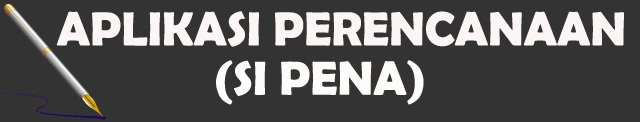
<style>
.page{position:relative;width:640px;height:122px;background:#333333}
.page>*{position:absolute;margin:0}
.t1{font:48px "BerlinSansFBDemi-Bold";color:#fbf5f5}
.t2{font:48px "BerlinSansFBDemi-Bold";color:#fefbfb}
.t3{font:48px "BerlinSansFBDemi-Bold";color:#090909}
</style>
<div class="page">
<p class="t1" style="left:56px;top:11px;width:568px;height:36px">APLIKASI PERENCANAAN</p>
<p class="t2" style="left:216px;top:60px;width:208px;height:45px"><span class="t3"> </span>(SI PENA)</p>
</div>
